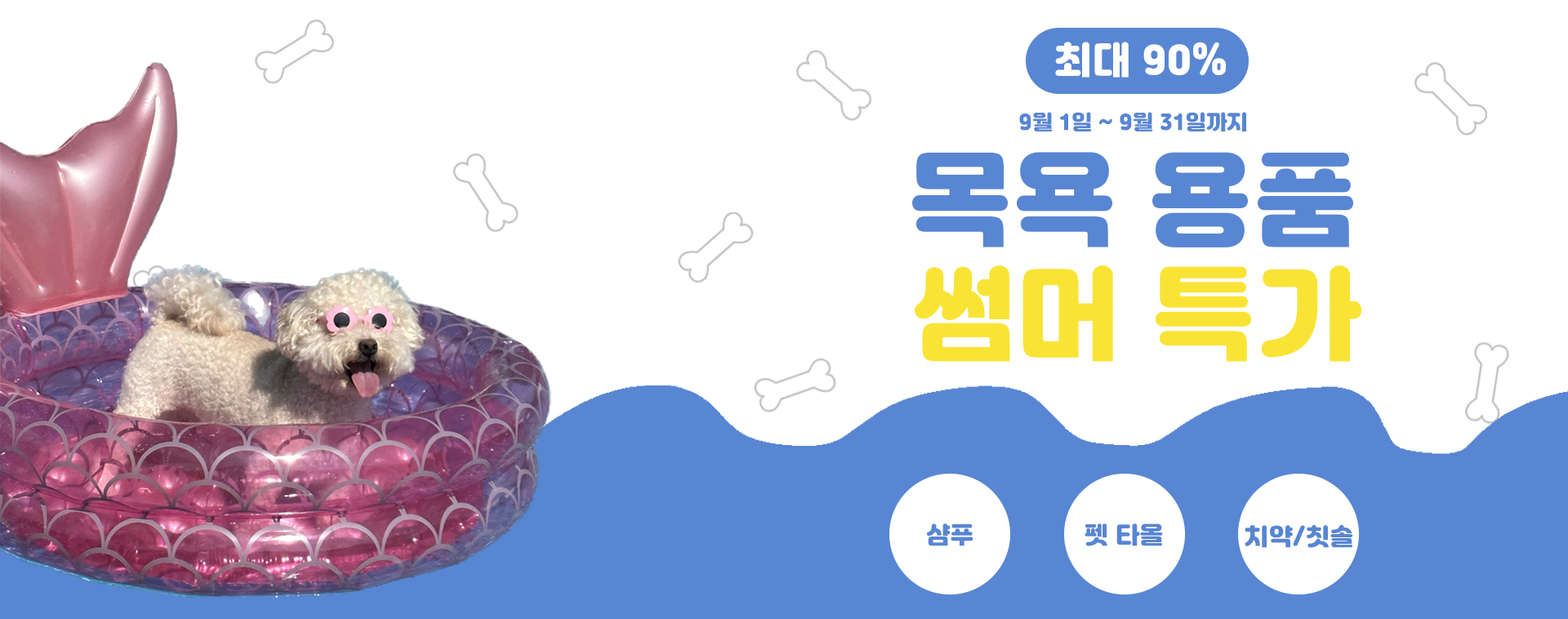
<style>
.page{position:relative;width:1568px;height:619px;background:#ffffff}
.page>*{position:absolute;margin:0}
.t1{font:37.4px "Jalnan";letter-spacing:0.025em;color:#ffffff}
.t2{font:20.4px "Jalnan";letter-spacing:0.025em;color:#5886d3}
.t3{font:102.1px "Jalnan";letter-spacing:0.025em;color:#5886d3}
.t4{font:102.1px "Jalnan";letter-spacing:0.025em;color:#f9e435}
.t5{font:23.5px "Jalnan";letter-spacing:0.025em;color:#5886d3}
</style>
<div class="page">
<p class="t1" style="left:1055px;top:42px;width:171px;height:36px">최대 90%</p>
<p class="t2" style="left:1019px;top:112px;width:227px;height:19px">9월 1일 ~ 9월 31일까지</p>
<p class="t3" style="left:912px;top:152px;width:441px;height:95px">목욕 용품</p>
<p class="t4" style="left:914px;top:265px;width:447px;height:97px">썸머 특가</p>
<p class="t5" style="left:927px;top:523px;width:46px;height:23px">샴푸</p>
<p class="t5" style="left:1085px;top:523px;width:78px;height:23px">펫 타올</p>
<p class="t5" style="left:1245px;top:525px;width:108px;height:23px">치약/칫솔</p>
</div>
